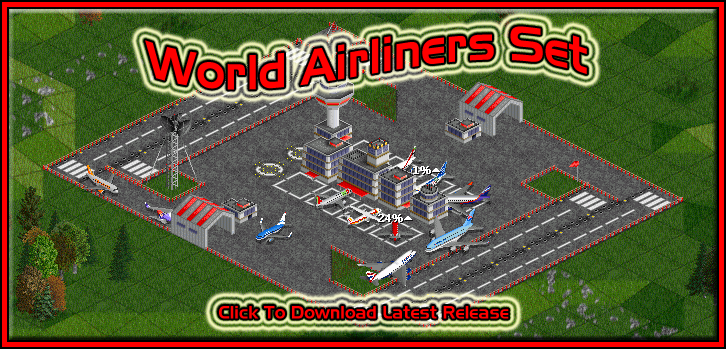
<style>
.page{position:relative;width:726px;height:349px}
.page>*{position:absolute;margin:0}
.t1{font:48px "Slider";color:#ff0000}
.t2{font:18px "Slider";color:#ff0000}
</style>
<div class="page">
<p class="t1" style="left:145px;top:26px;width:442px;height:64px">World Airliners Set</p>
<p class="t2" style="left:219px;top:306px;width:290px;height:13px">Click To Download Latest Release</p>
</div>
